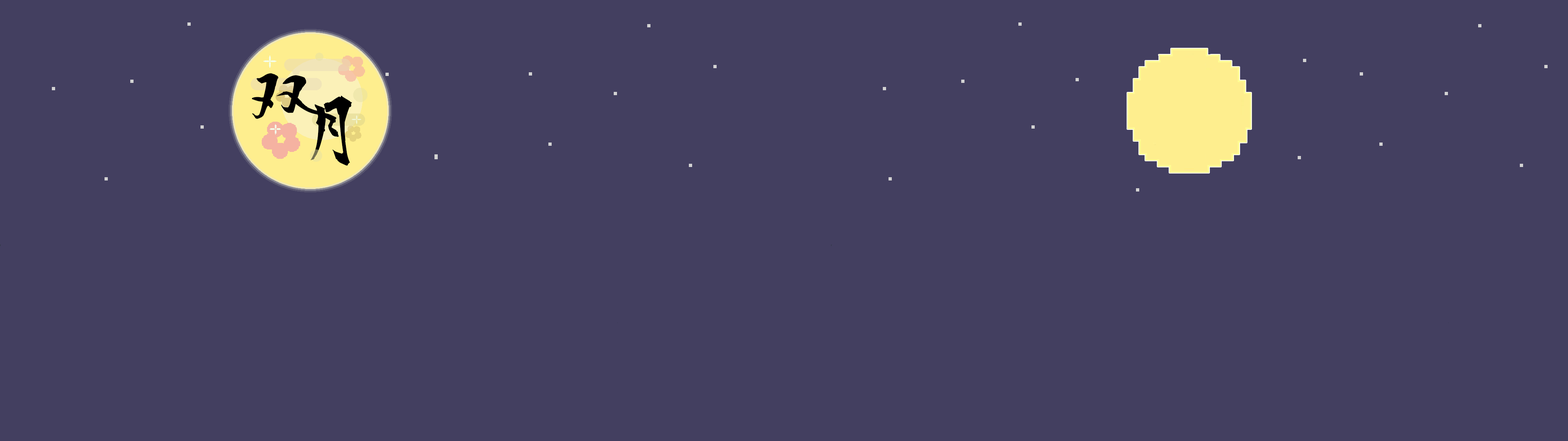
<style>
.page{position:relative;width:1568px;height:441px;background:#433f60}
.page>*{position:absolute;margin:0}
.t1{font:88.7px "KouzanBrushFontGyousyo";color:#000000}
.t2{font:86.4px "KouzanBrushFontGyousyo";color:#000000}
</style>
<div class="page">
<p class="t1" style="left:252px;top:73px;width:75px;height:46px">双</p>
<p class="t2" style="left:311px;top:96px;width:41px;height:70px">月</p>
</div>
